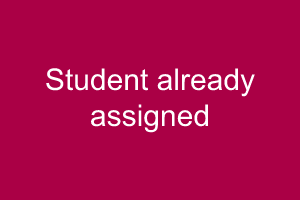
<style>
.page{position:relative;width:300px;height:200px;background:#aa0045}
.page>*{position:absolute;margin:0}
.t1{font:30px "ArialMT";color:#ffffff}
</style>
<div class="page">
<p class="t1" style="left:46px;top:68px;width:209px;height:65px;text-align:center">Student already<br>assigned</p>
</div>
